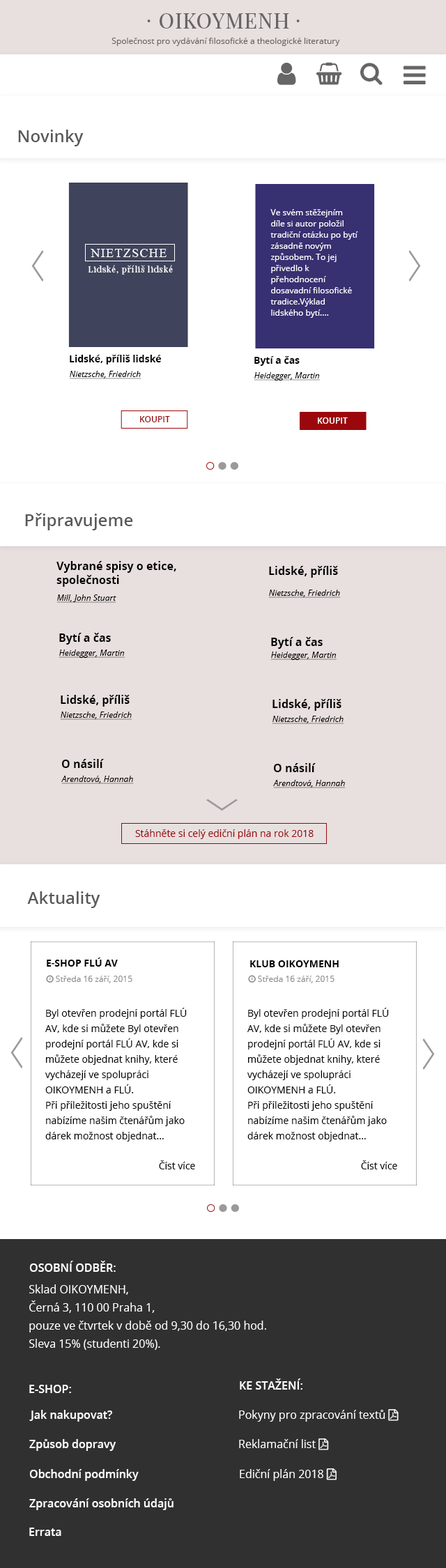
<style>
.page{position:relative;width:446px;height:1568px;background:#ffffff}
.page>*{position:absolute;margin:0}
.t1{font:20.9px "PlayfairDisplay-Regular";letter-spacing:0.04em;color:#666666}
.t2{font:20.9px "PlayfairDisplaySC-Regular";letter-spacing:0.04em;color:#666666}
.t3{font:8.4px "OpenSans";color:#666666}
.t4{font:16.7px "OpenSans-Semibold";color:#595959}
.t5{font:8.4px/11.2px "OpenSans";color:#ffffff}
.t6{font:12.5px "TimesNewRomanPSMT";letter-spacing:0.075em;color:#ffffff;text-transform:uppercase}
.t7{font:8.4px "PlayfairDisplay-Regular";letter-spacing:0.075em;color:#ffffff}
.t8{font:9.8px "OpenSans-Bold";color:#000000}
.t9{font:8.4px "OpenSans-Italic";color:#000000;text-decoration:underline}
.t10{font:8.4px "OpenSans-Semibold";color:#9a080d;text-transform:uppercase}
.t11{font:8.4px "OpenSans-Semibold";color:#ffffff;text-transform:uppercase}
.t12{font:11.2px/13.9px "OpenSans-Bold";color:#000000}
.t13{font:11.2px "OpenSans-Bold";color:#000000}
.t14{font:9.8px "OpenSans";color:#9a080d}
.t15{font:9.8px/15.3px "OpenSans";color:#000000}
.t16{font:9.8px "OpenSans";color:#000000}
.t17{font:11.2px "OpenSans-Semibold";color:#ffffff;text-transform:uppercase}
.t18{font:11.2px/18.1px "OpenSans";color:#ffffff}
.t19{font:11.2px "OpenSans-Semibold";color:#ffffff}
</style>
<div class="page">
<p class="t1" style="left:160px;top:13px;width:129px;height:16px">OIKOYMENH</p>
<p class="t2" style="left:147px;top:20px;width:4px;height:2px">·</p>
<p class="t2" style="left:296px;top:20px;width:4px;height:2px">·</p>
<p class="t3" style="left:112px;top:38px;width:228px;height:8px">Společnost pro vydávání filosofické a theologické literatury</p>
<p class="t4" style="left:18px;top:130px;width:66px;height:16px">Novinky</p>
<p class="t5" style="left:270px;top:209px;width:88px;height:109px">Ve svém stěžejním díle si autor položil tradiční otázku po bytí zásadně novým způsobem. To jej přivedlo k přehodnocení dosavadní filosofické tradice.Výklad lidského bytí....</p>
<p class="t6" style="left:91px;top:249px;width:76px;height:8px">Nietzsche</p>
<p class="t7" style="left:88px;top:265px;width:85px;height:10px">Lidské, příliš lidské</p>
<p class="t8" style="left:70px;top:355px;width:91px;height:9px">Lidské, příliš lidské</p>
<p class="t8" style="left:254px;top:356px;width:46px;height:10px">Bytí a čas</p>
<p class="t9" style="left:69px;top:371px;width:72px;height:8px">Nietzsche, Friedrich</p>
<p class="t9" style="left:254px;top:372px;width:66px;height:9px">Heidegger, Martin</p>
<p class="t10" style="left:140px;top:416px;width:30px;height:6px">koupit</p>
<p class="t11" style="left:318px;top:417px;width:30px;height:7px">koupit</p>
<p class="t4" style="left:25px;top:513px;width:108px;height:17px">Připravujeme</p>
<p class="t12" style="left:56px;top:561px;width:120px;height:26px">Vybrané spisy o etice, společnosti <br>a politice II</p>
<p class="t13" style="left:269px;top:566px;width:69px;height:12px">Lidské, příliš lidské</p>
<p class="t9" style="left:268px;top:590px;width:73px;height:8px">Nietzsche, Friedrich</p>
<p class="t9" style="left:56px;top:594px;width:60px;height:9px">Mill, John Stuart</p>
<p class="t13" style="left:59px;top:633px;width:52px;height:12px">Bytí a čas</p>
<p class="t13" style="left:271px;top:637px;width:52px;height:12px">Bytí a čas</p>
<p class="t9" style="left:59px;top:650px;width:66px;height:8px">Heidegger, Martin</p>
<p class="t9" style="left:270px;top:652px;width:67px;height:8px">Heidegger, Martin</p>
<p class="t13" style="left:61px;top:695px;width:69px;height:12px">Lidské, příliš lidské</p>
<p class="t13" style="left:272px;top:699px;width:69px;height:12px">Lidské, příliš lidské</p>
<p class="t9" style="left:60px;top:712px;width:72px;height:8px">Nietzsche, Friedrich</p>
<p class="t9" style="left:272px;top:716px;width:72px;height:8px">Nietzsche, Friedrich</p>
<p class="t13" style="left:62px;top:759px;width:42px;height:9px">O násilí</p>
<p class="t13" style="left:274px;top:763px;width:42px;height:9px">O násilí</p>
<p class="t9" style="left:61px;top:776px;width:73px;height:8px">Arendtová, Hannah</p>
<p class="t9" style="left:273px;top:780px;width:73px;height:8px">Arendtová, Hannah</p>
<p class="t14" style="left:135px;top:829px;width:179px;height:10px">Stáhněte si celý ediční plán na rok 2018</p>
<p class="t4" style="left:27px;top:891px;width:73px;height:17px">Aktuality</p>
<p class="t8" style="left:47px;top:958px;width:71px;height:9px">E-SHOP FLÚ AV</p>
<p class="t8" style="left:250px;top:960px;width:89px;height:7px">KLUB OIKOYMENH</p>
<p class="t15" style="left:45px;top:1008px;width:142px;height:134px">Byl otevřen prodejní portál FLÚ AV, kde si můžete Byl otevřen prodejní portál FLÚ AV, kde si můžete objednat knihy, které vycházejí ve spolupráci OIKOYMENH a FLÚ. <br>Při příležitosti jeho spuštění nabízíme našim čtenářům jako dárek možnost objednat... kterévycházejí ve spolupráci OIKOYMENH a FLÚ. Při příležitosti jeho spuštění nabízíme...</p>
<p class="t15" style="left:247px;top:1008px;width:142px;height:134px">Byl otevřen prodejní portál FLÚ AV, kde si můžete Byl otevřen prodejní portál FLÚ AV, kde si můžete objednat knihy, které vycházejí ve spolupráci OIKOYMENH a FLÚ. <br>Při příležitosti jeho spuštění nabízíme našim čtenářům jako dárek možnost objednat... kterévycházejí ve spolupráci OIKOYMENH a FLÚ. Při příležitosti jeho spuštění nabízíme...</p>
<p class="t16" style="left:159px;top:1160px;width:36px;height:9px">Číst více</p>
<p class="t16" style="left:361px;top:1160px;width:36px;height:9px">Číst více</p>
<p class="t17" style="left:29px;top:1261px;width:87px;height:11px">OSOBNÍ ODBĚR:</p>
<p class="t18" style="left:29px;top:1284px;width:237px;height:66px">Sklad OIKOYMENH,<br>Černá 3, 110 00 Praha 1,<br>pouze ve čtvrtek v době od 9,30 do 16,30 hod.<br>Sleva 15% (studenti 20%).</p>
<p class="t17" style="left:29px;top:1385px;width:42px;height:8px">e-shop:</p>
<p class="t17" style="left:240px;top:1378px;width:62px;height:12px">Ke stažení:</p>
<p class="t19" style="left:29px;top:1410px;width:83px;height:12px"><span class="t17">J</span>ak nakupovat?</p>
<p class="t19" style="left:29px;top:1439px;width:87px;height:12px">Způsob dopravy</p>
<p class="t19" style="left:29px;top:1469px;width:110px;height:12px">Obchodní podmínky</p>
<p class="t19" style="left:29px;top:1498px;width:145px;height:12px">Zpracování osobních údajů</p>
<p class="t19" style="left:29px;top:1528px;width:32px;height:8px">Errata</p>
</div>
